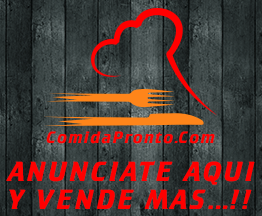
<style>
.page{position:relative;width:262px;height:216px}
.page>*{position:absolute;margin:0}
.t1{font:16.7px "Cricket-Bold";letter-spacing:0.075em;color:#ff0000}
.t2{font:27.9px "Cricket-Bold";letter-spacing:0.075em;color:#ff0000}
</style>
<div class="page">
<p class="t1" style="left:46px;top:131px;width:169px;height:13px">ComidaPronto.Com</p>
<p class="t2" style="left:6px;top:161px;width:249px;height:24px">ANUNCIATE AQUI</p>
<p class="t2" style="left:9px;top:189px;width:243px;height:20px">Y VENDE MAS...!!</p>
</div>
